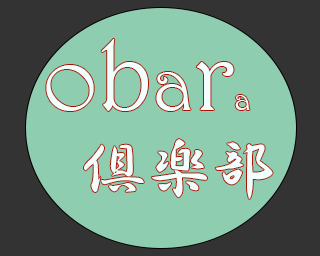
<style>
.page{position:relative;width:320px;height:256px;background:#8fcdb0}
.page>*{position:absolute;margin:0}
.t1{font:94.9px "Harrington";color:#f3feff}
.t2{font:100px "Harrington";color:#f3feff}
.t3{font:79.1px "Harrington";color:#f3feff}
.t4{font:31.6px "Harrington";color:#f3feff}
.t5{font:65.3px "HGPGyoshotai";color:#f3feff}
</style>
<div class="page">
<p class="t1" style="left:46px;top:39px;width:204px;height:72px">o<span class="t2">b</span><span class="t3">a</span><span class="t2">r</span><span class="t4">a</span></p>
<p class="t5" style="left:84px;top:139px;width:189px;height:60px">倶楽部</p>
</div>
